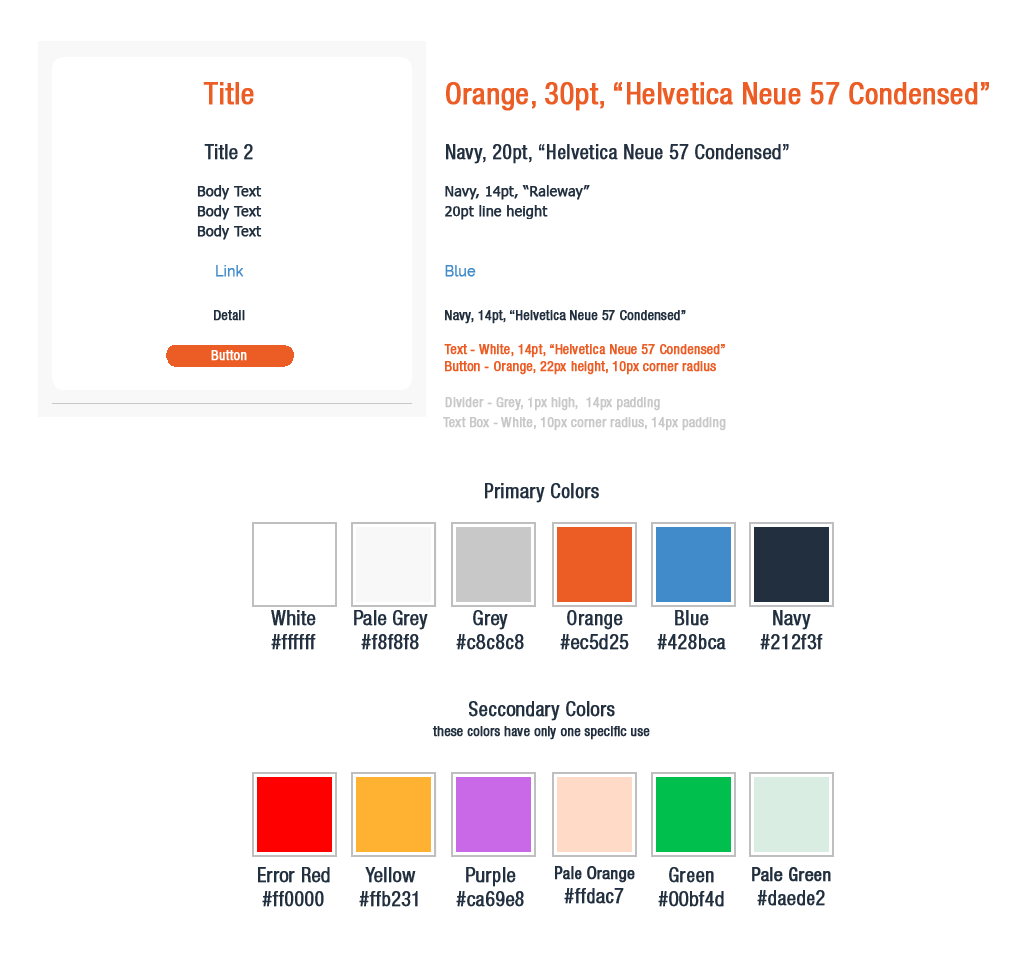
<style>
.page{position:relative;width:1023px;height:960px;background:#ffffff}
.page>*{position:absolute;margin:0}
.t1{font:30px "HelveticaNeueLTPro-Cn";color:#ec5d25;font-weight:bold}
.t2{font:20px "HelveticaNeueLTPro-Cn";color:#212f3f;font-weight:bold}
.t3{font:14px/20px "Tahoma";color:#212f3f;font-weight:bold}
.t4{font:14px/20px "Raleway";color:#428bca;font-weight:bold}
.t5{font:14px "HelveticaNeueLTPro-Cn";color:#212f3f;font-weight:bold}
.t6{font:14px "HelveticaNeueLTPro-Cn";color:#ffffff;font-weight:bold}
.t7{font:14px "HelveticaNeueLTPro-Cn";color:#ec5d25;font-weight:bold}
.t8{font:14px "HelveticaNeueLTPro-Cn";color:#c8c8c8;font-weight:bold}
.t9{font:14px/20px "HelveticaNeueLTPro-Cn";color:#212f3f;font-weight:bold}
.t10{font:17px "HelveticaNeueLTPro-Cn";color:#212f3f;font-weight:bold}
.t11{font:19px "HelveticaNeueLTPro-Cn";color:#212f3f;font-weight:bold}
</style>
<div class="page">
<p class="t1" style="left:203px;top:82px;width:51px;height:23px">Title</p>
<p class="t1" style="left:446px;top:82px;width:543px;height:29px">Orange, 30pt, “Helvetica Neue 57 Condensed”</p>
<p class="t2" style="left:204px;top:144px;width:49px;height:16px">Title 2</p>
<p class="t2" style="left:446px;top:144px;width:343px;height:20px">Navy, 20pt, “Helvetica Neue 57 Condensed”</p>
<p class="t3" style="left:197px;top:185px;width:65px;height:92px;text-align:center">Body Text<br>Body Text<br>Body Text<br><br><span class="t4">Link</span></p>
<p class="t3" style="left:445px;top:185px;width:145px;height:92px">Navy, 14pt, “Raleway”<br>20pt line height<br><br><br><span class="t4">Blue</span></p>
<p class="t5" style="left:214px;top:310px;width:31px;height:11px">Detail</p>
<p class="t5" style="left:445px;top:310px;width:241px;height:14px">Navy, 14pt, “Helvetica Neue 57 Condensed”</p>
<p class="t6" style="left:211px;top:350px;width:36px;height:11px">Button</p>
<p class="t7" style="left:444px;top:344px;width:281px;height:31px">Text - White, 14pt, “Helvetica Neue 57 Condensed”<br>Button - Orange, 22px height, 10px corner radius</p>
<p class="t8" style="left:445px;top:397px;width:215px;height:14px">Divider - Grey, 1px high,  14px padding</p>
<p class="t8" style="left:443px;top:417px;width:283px;height:14px">Text Box - White, 10px corner radius, 14px padding</p>
<p class="t2" style="left:485px;top:483px;width:114px;height:20px">Primary Colors</p>
<p class="t2" style="left:271px;top:610px;width:45px;height:40px;text-align:center">White<br>#ffffff</p>
<p class="t2" style="left:354px;top:610px;width:74px;height:40px;text-align:center">Pale Grey<br>#f8f8f8</p>
<p class="t2" style="left:456px;top:610px;width:68px;height:40px;text-align:center">Grey<br>#c8c8c8</p>
<p class="t2" style="left:560px;top:610px;width:69px;height:40px;text-align:center">Orange<br>#ec5d25</p>
<p class="t2" style="left:657px;top:610px;width:69px;height:40px;text-align:center">Blue<br>#428bca</p>
<p class="t2" style="left:760px;top:610px;width:63px;height:40px;text-align:center">Navy<br>#212f3f</p>
<p class="t9" style="left:432px;top:701px;width:218px;height:39px;text-align:center"><span class="t2">Seccondary Colors<br></span>these colors have only one specific use</p>
<p class="t2" style="left:258px;top:867px;width:72px;height:40px;text-align:center">Error Red<br>#ff0000</p>
<p class="t2" style="left:359px;top:867px;width:59px;height:40px;text-align:center">Yellow<br>#ffb231</p>
<p class="t2" style="left:456px;top:867px;width:68px;height:40px;text-align:center">Purple<br>#ca69e8</p>
<p class="t10" style="left:555px;top:866px;width:80px;height:38px;text-align:center">Pale Orange<br><span class="t2">#ffdac7</span></p>
<p class="t2" style="left:658px;top:867px;width:66px;height:40px;text-align:center">Green<br>#00bf4d</p>
<p class="t11" style="left:752px;top:867px;width:79px;height:39px;text-align:center">Pale Green<br><span class="t2">#daede2</span></p>
</div>
